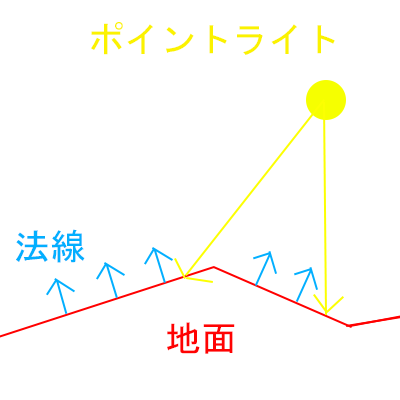
<style>
.page{position:relative;width:400px;height:400px;background:#ffffff}
.page>*{position:absolute;margin:0}
.t1{font:36px "MS-Gothic";color:#fbf200}
.t2{font:36px "MS-Gothic";color:#02afff}
.t3{font:36px "MS-Gothic";color:#ff0202}
</style>
<div class="page">
<p class="t1" style="left:91px;top:22px;width:244px;height:33px">ポイントライト</p>
<p class="t2" style="left:16px;top:229px;width:69px;height:34px">法線</p>
<p class="t3" style="left:167px;top:322px;width:68px;height:32px">地面</p>
</div>
